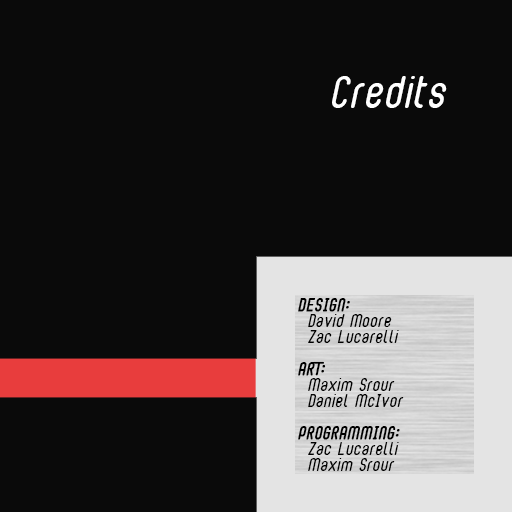
<style>
.page{position:relative;width:512px;height:512px;background:#0a0a0a}
.page>*{position:absolute;margin:0}
.t1{font:30px "BubbleBoy2";color:#ffffff}
.t2{font:12px/16px "BubbleBoy2";color:#000000}
.t3{font:12px/16px "BubbleBoy2";color:#000000;text-transform:uppercase;font-weight:bold}
</style>
<div class="page">
<p class="t1" style="left:332px;top:76px;width:115px;height:32px">Credits</p>
<p class="t2" style="left:298px;top:298px;width:106px;height:173px"><span class="t3">Design:<br></span>David Moore<br>Zac Lucarelli<br><br><span class="t3">Art:<br></span>Maxim Srour<br>Daniel McIvor<br><br><span class="t3">Programming:<br></span>Zac Lucarelli<br>Maxim Srour</p>
</div>
